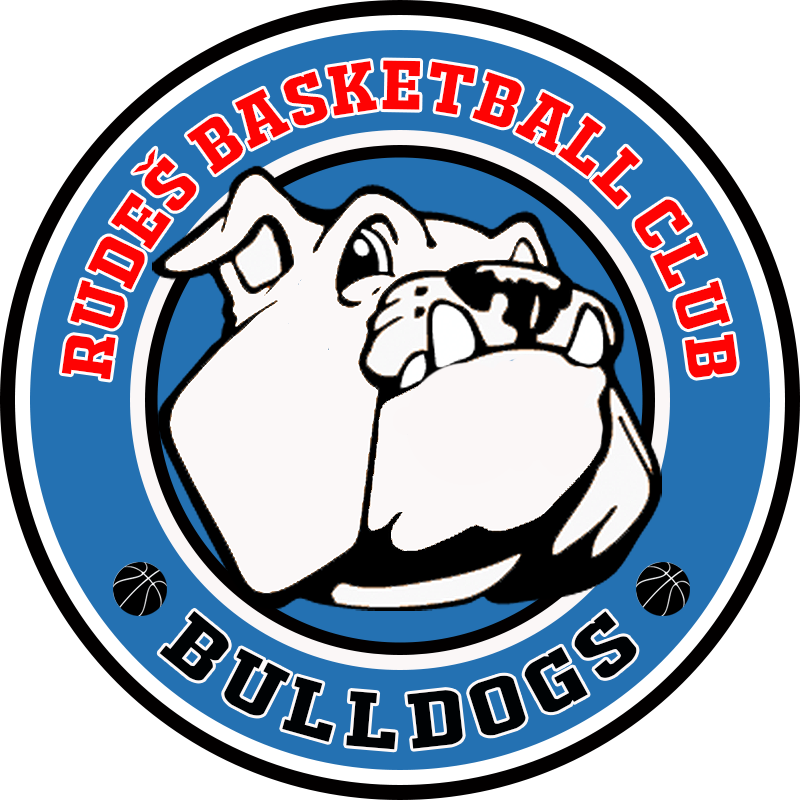
<style>
.page{position:relative;width:800px;height:800px;background:#ffffff}
.page>*{position:absolute;margin:0}
.t1{font:66.7px "JACKPORTREGULARNCV";color:#fe0303;scale:1.52 1}
.t2{font:75px "JACKPORTREGULARNCV";color:#000204;scale:1.77 1}
</style>
<div class="page">
<p class="t1" style="left:61px;top:60px;width:676px;height:320px;text-align:center">RUDEŠ basketball club</p>
<p class="t2" style="left:159px;top:610px;width:478px;height:140px;text-align:center">bulldogs</p>
</div>
